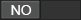
<style>
.page{position:relative;width:81px;height:20px;background:#333333}
.page>*{position:absolute;margin:0}
.t1{font:14px "ArialMT";color:#ffffff}
</style>
<div class="page">
<p class="t1" style="left:11px;top:5px;width:21px;height:10px">NO</p>
</div>
